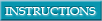
<style>
.page{position:relative;width:102px;height:21px;background:#0795af}
.page>*{position:absolute;margin:0}
.t1{font:12px "BookAntiqua";color:#ffffff}
</style>
<div class="page">
<p class="t1" style="left:5px;top:7px;width:91px;height:8px">INSTRUCTIONS</p>
</div>
